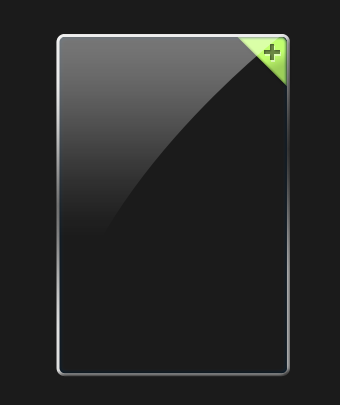
<style>
.page{position:relative;width:340px;height:405px;background:#1b1b1b}
.page>*{position:absolute;margin:0}
.t1{font:36px "NeoSansIntel-Medium";color:#647f3f}
</style>
<div class="page">
<p class="t1" style="left:264px;top:44px;width:16px;height:16px">+</p>
</div>
